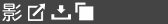
<style>
.page{position:relative;width:168px;height:24px;background:#444444}
.page>*{position:absolute;margin:0}
.t1{font:20.3px "HCP-Maru-Gothic";color:#ffffff}
</style>
<div class="page">
<p class="t1" style="left:2px;top:3px;width:20px;height:19px">影</p>
</div>
